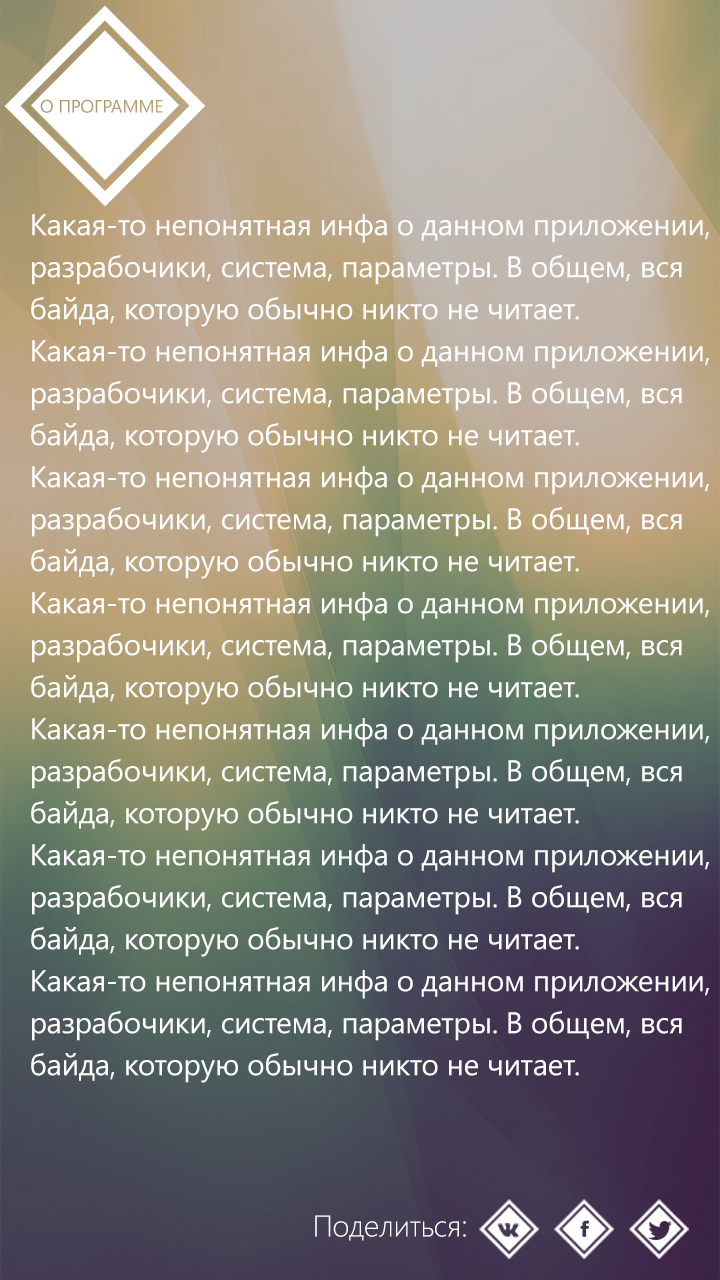
<style>
.page{position:relative;width:720px;height:1280px}
.page>*{position:absolute;margin:0}
.t1{font:30px/40px "SegoeUI";letter-spacing:-0.01em;color:#ffffff}
.t2{font:30px "SegoeUI-Light";letter-spacing:-0.01em;color:#ffffff}
</style>
<div class="page">
<p class="t1" style="left:31px;top:214px;width:678px;height:869px">Какая-то непонятная инфа о данном приложении, <br>разрабочики, система, параметры. В общем, вся<br>байда, которую обычно никто не читает.<br>Какая-то непонятная инфа о данном приложении, <br>разрабочики, система, параметры. В общем, вся<br>байда, которую обычно никто не читает.<br>Какая-то непонятная инфа о данном приложении, <br>разрабочики, система, параметры. В общем, вся <br>байда, которую обычно никто не читает.<br>Какая-то непонятная инфа о данном приложении, <br>разрабочики, система, параметры. В общем, вся <br>байда, которую обычно никто не читает.<br>Какая-то непонятная инфа о данном приложении, <br>разрабочики, система, параметры. В общем, вся <br>байда, которую обычно никто не читает.<br>Какая-то непонятная инфа о данном приложении, <br>разрабочики, система, параметры. В общем, вся <br>байда, которую обычно никто не читает.<br>Какая-то непонятная инфа о данном приложении, <br>разрабочики, система, параметры. В общем, вся <br>байда, которую обычно никто не читает.</p>
<p class="t2" style="left:315px;top:1215px;width:151px;height:26px">Поделиться:</p>
</div>
